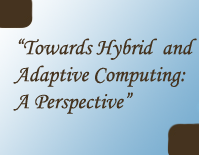
<style>
.page{position:relative;width:199px;height:155px}
.page>*{position:absolute;margin:0}
.t1{font:22.5px "MonotypeCorsiva";color:#45331f}
</style>
<div class="page">
<p class="t1" style="left:13px;top:38px;width:184px;height:76px">“Towards Hybrid  and Adaptive Computing: A Perspective”</p>
</div>
